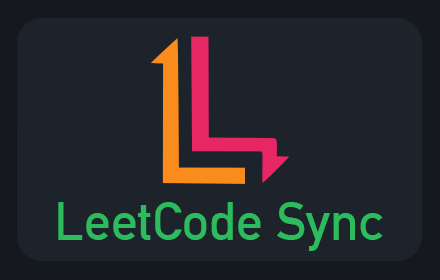
<style>
.page{position:relative;width:440px;height:280px;background:#1d232a}
.page>*{position:absolute;margin:0}
.t1{font:53.3px "DINAlternate-Bold";color:#2cbb5d}
</style>
<div class="page">
<p class="t1" style="left:58px;top:202px;width:325px;height:49px">LeetCode Sync</p>
</div>
